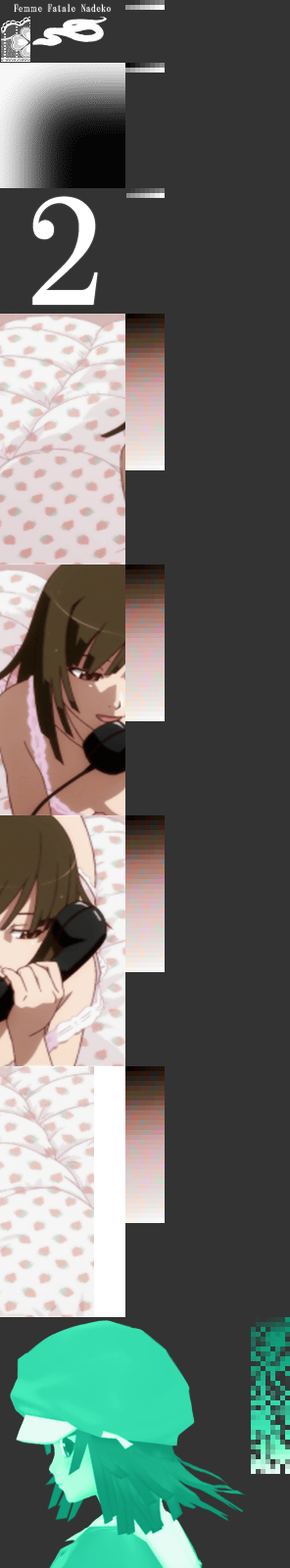
<style>
.page{position:relative;width:290px;height:1568px;background:#333333}
.page>*{position:absolute;margin:0}
.t1{font:9.8px "HGMinchoB";letter-spacing:0.01em;color:#ffffff}
.t2{font:9.8px "HGMinchoB";letter-spacing:0.075em;color:#ffffff;scale:0.7 1}
.t3{font:147px "HGMinchoB";letter-spacing:0.01em;color:#ffffff}
</style>
<div class="page">
<p class="t1" style="left:14px;top:4px;width:97px;height:9px">Fe<span class="t2">ｍｍ</span>e Fatale Nadeko</p>
<p class="t3" style="left:32px;top:196px;width:66px;height:109px">2</p>
</div>
